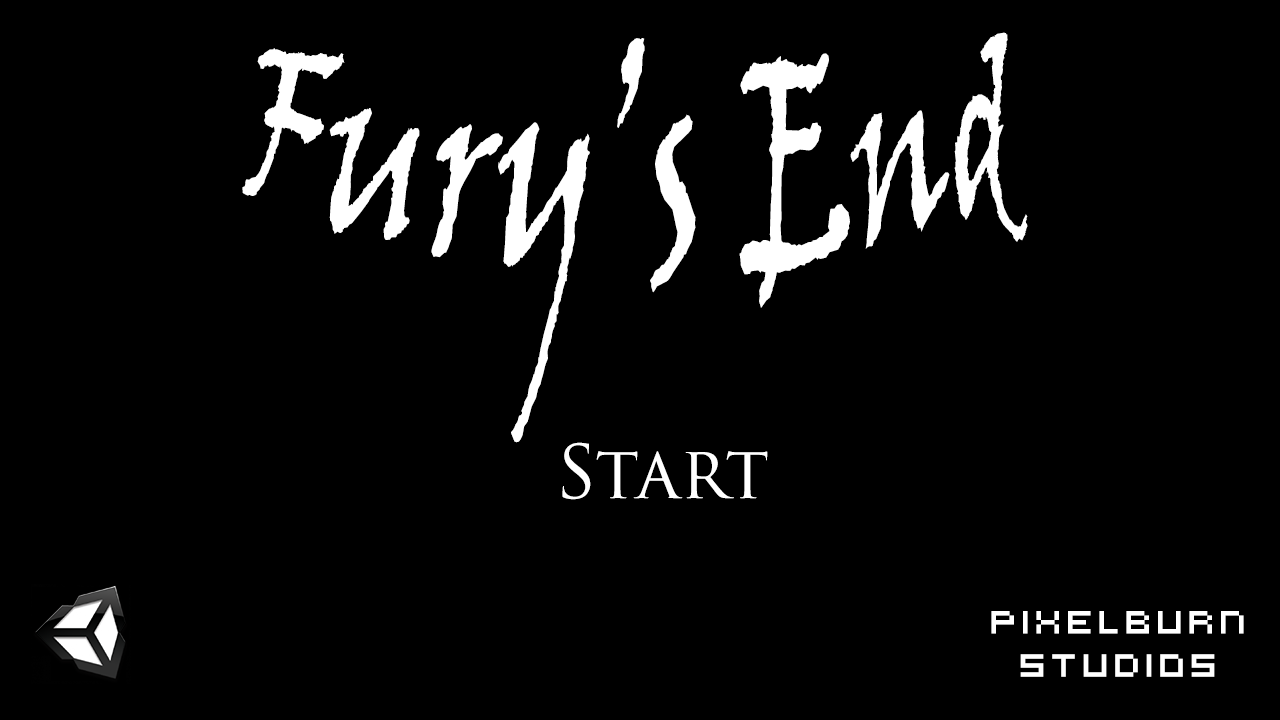
<style>
.page{position:relative;width:1280px;height:720px;background:#000000}
.page>*{position:absolute;margin:0}
.t1{font:150px "VinerHandITC";color:#ffffff}
.t2{font:72px "TrajanPro3-Regular";color:#ffffff}
.t3{font:36px "VirtualDJ";color:#ffffff}
</style>
<div class="page">
<p class="t1" style="left:242px;top:32px;width:786px;height:411px;text-align:center">Fury’s End</p>
<p class="t2" style="left:562px;top:442px;width:206px;height:58px">Start</p>
<p class="t3" style="left:991px;top:611px;width:253px;height:66px;text-align:center">PixelBurn Studios</p>
</div>
